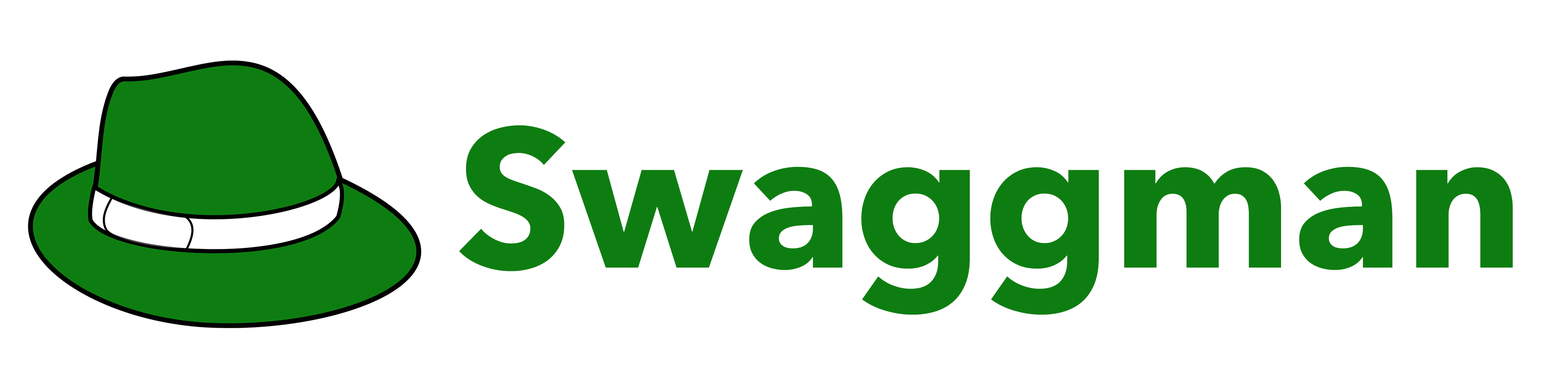
<style>
.page{position:relative;width:1568px;height:392px;background:#ffffff}
.page>*{position:absolute;margin:0}
.t1{font:196px "AvenirNext-Bold";color:#0e7d11}
</style>
<div class="page">
<p class="t1" style="left:459px;top:125px;width:1054px;height:190px">Swaggman</p>
</div>
